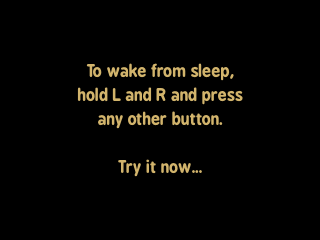
<style>
.page{position:relative;width:320px;height:240px;background:#000000}
.page>*{position:absolute;margin:0}
.t1{font:16px/24px "BPreplay-Bold";color:#d2b46c}
</style>
<div class="page">
<p class="t1" style="left:77px;top:63px;width:166px;height:114px;text-align:center">To wake from sleep,<br>hold L and R and press<br>any other button.<br><br>Try it now...</p>
</div>
